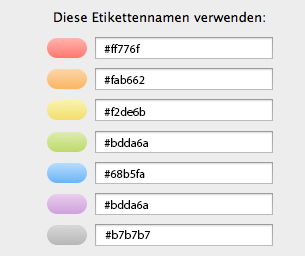
<style>
.page{position:relative;width:305px;height:256px;background:#ededed}
.page>*{position:absolute;margin:0}
.t1{font:12px "MyriadPro-Regular";color:#000000}
</style>
<div class="page">
<p class="t1" style="left:104px;top:44px;width:37px;height:9px">#ff776f</p>
<p class="t1" style="left:104px;top:75px;width:41px;height:9px">#fab662</p>
<p class="t1" style="left:104px;top:107px;width:42px;height:9px">#f2de6b</p>
<p class="t1" style="left:104px;top:138px;width:45px;height:9px">#bdda6a</p>
<p class="t1" style="left:104px;top:169px;width:41px;height:9px">#68b5fa</p>
<p class="t1" style="left:104px;top:200px;width:45px;height:9px">#bdda6a</p>
<p class="t1" style="left:105px;top:230px;width:45px;height:9px">#b7b7b7</p>
</div>
